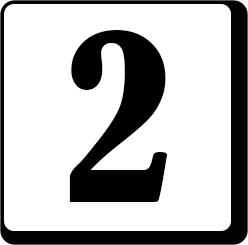
<style>
.page{position:relative;width:248px;height:245px;background:#ffffff}
.page>*{position:absolute;margin:0}
.t1{font:216px "BernardMT-Condensed";color:#010000}
</style>
<div class="page">
<p class="t1" style="left:69px;top:30px;width:98px;height:172px">2</p>
</div>
